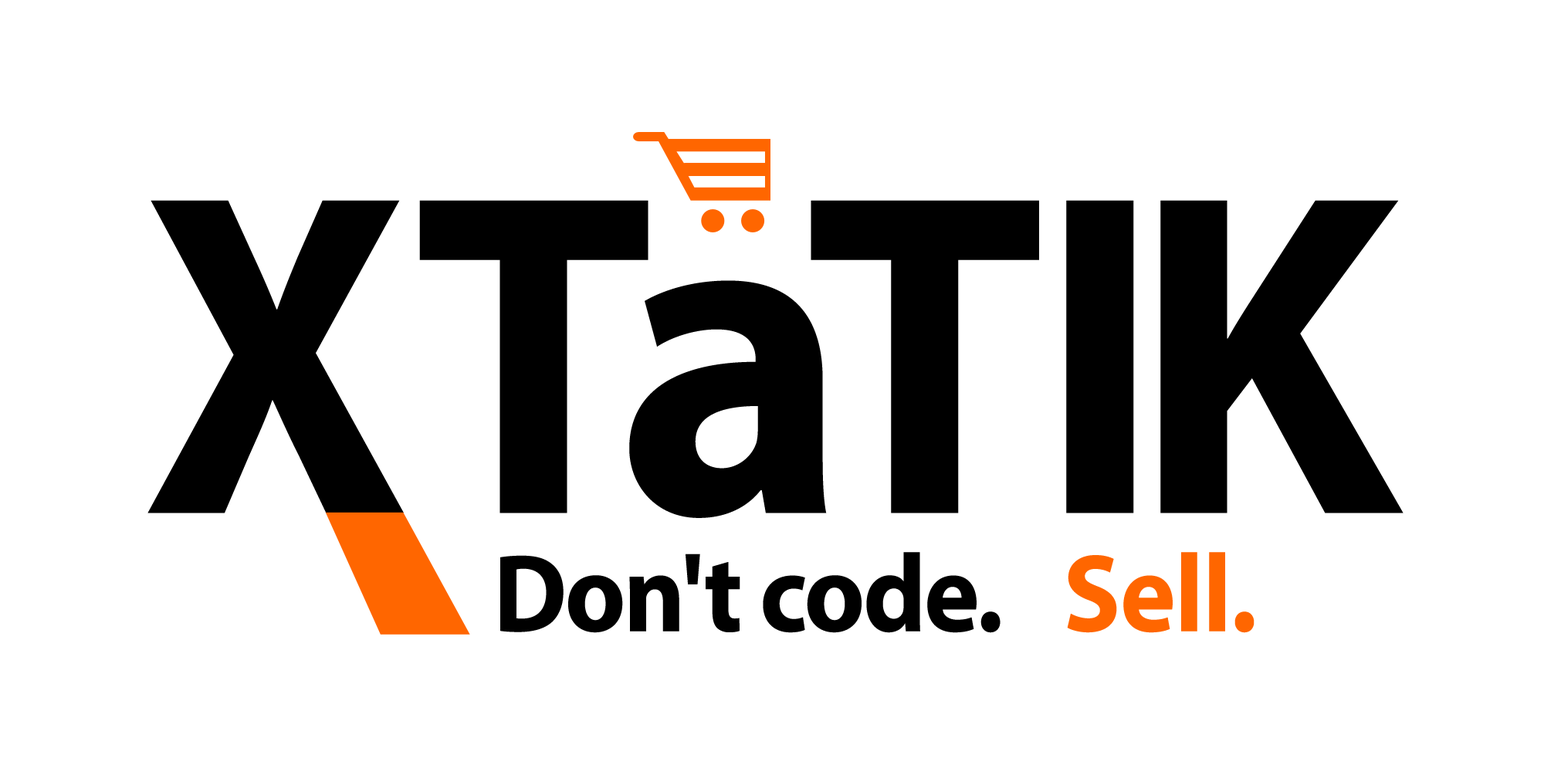
<style>
.page{position:relative;width:1544px;height:772px;background:#ffffff}
.page>*{position:absolute;margin:0}
.t1{font:463.3px "MyriadPro-Bold";color:#000000;scale:0.95 1}
.t2{font:463.3px "MyriadPro-Bold";letter-spacing:-0.02em;color:#000000;scale:0.95 1}
.t3{font:463.3px "MyriadPro-Bold";letter-spacing:-0.04em;color:#000000;scale:0.95 1}
.t4{font:463.3px "MyriadPro-Bold";letter-spacing:-0.07em;color:#000000;scale:0.95 1}
.t5{font:111.2px "MyriadPro-Bold";letter-spacing:-0.02em;color:#000000;scale:0.95 1}
.t6{font:111.2px "MyriadPro-Bold";letter-spacing:-0.01em;color:#ff6600;scale:0.95 1}
</style>
<div class="page">
<p class="t1" style="left:147px;top:200px;width:1257px;height:318px">X<span class="t2">T</span><span class="t3">a</span><span class="t2">T</span><span class="t4">I</span><span class="t3">K</span></p>
<p class="t5" style="left:500px;top:552px;width:755px;height:81px">Don't code.    <span class="t6">Sell.</span></p>
</div>
